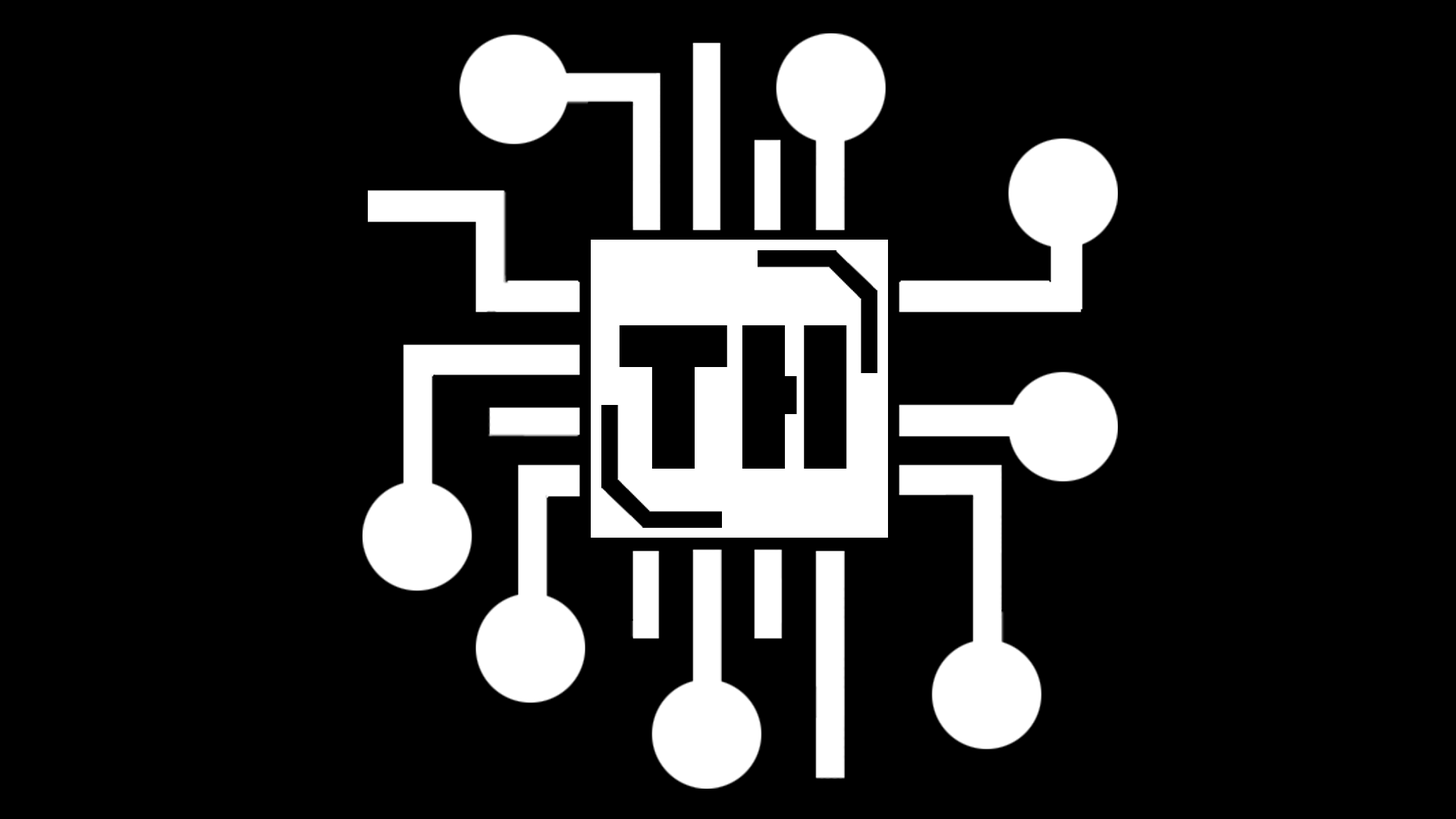
<style>
.page{position:relative;width:1456px;height:819px;background:#000000}
.page>*{position:absolute;margin:0}
.t1{font:215.6px "Bauhaus93";color:#000000}
</style>
<div class="page">
<p class="t1" style="left:619px;top:325px;width:228px;height:144px">TH</p>
</div>
